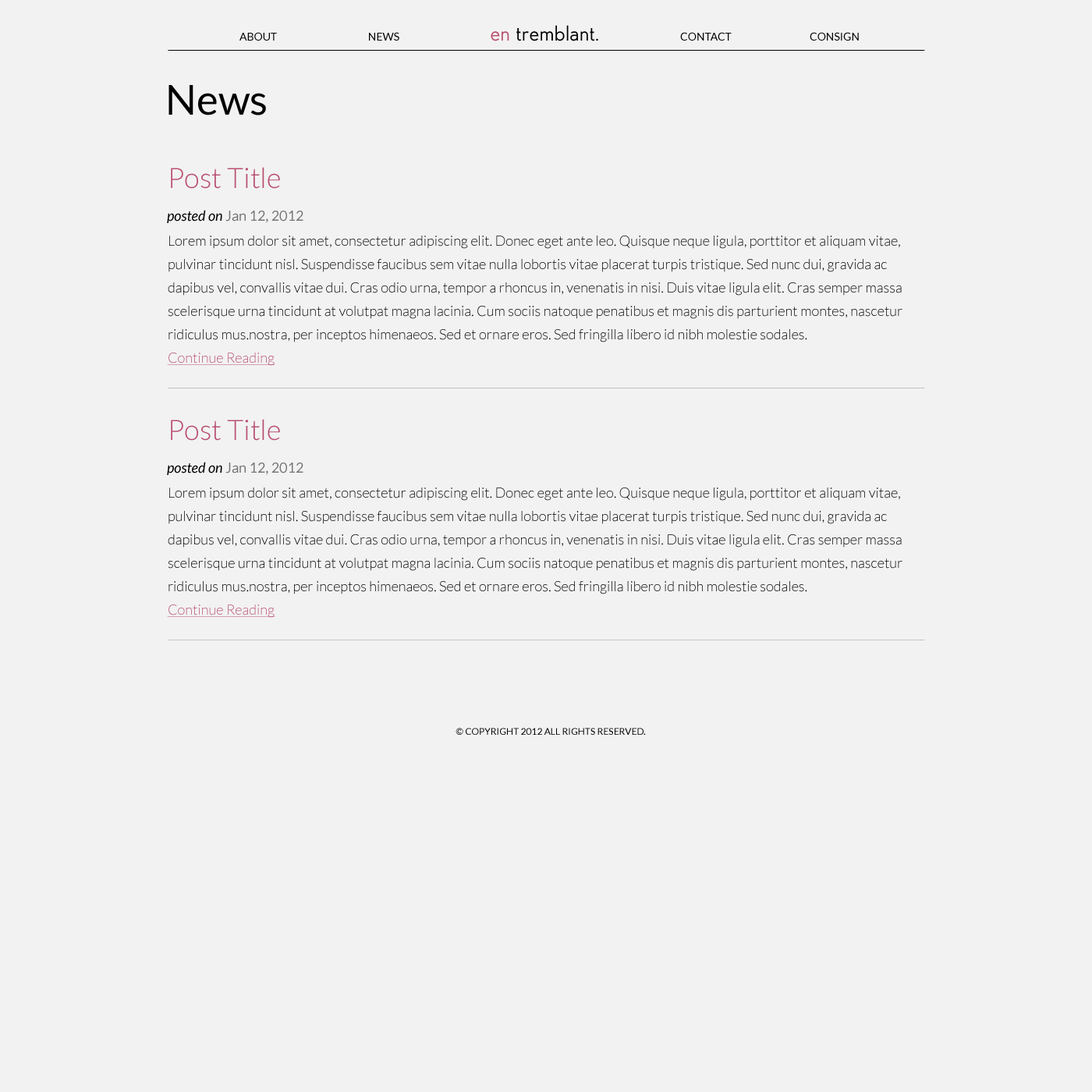
<style>
.page{position:relative;width:1092px;height:1092px;background:#f2f2f2}
.page>*{position:absolute;margin:0}
.t1{font:18.5px "Edelsans";color:#000000}
.t2{font:18.5px "Edelsans";color:#b84f6f}
.t3{font:10.9px "Lato-Regular";color:#000000}
.t4{font:41.3px "Lato-Regular";color:#000000}
.t5{font:28.1px "Lato-Light";color:#b84f6f}
.t6{font:14px "Lato-Regular";color:#757373}
.t7{font:14px "Lato-Italic";color:#000000}
.t8{font:14px/23.4px "Lato-Light";color:#000000}
.t9{font:14px/23.4px "Lato-Light";color:#b84f6f;text-decoration:underline}
.t10{font:9.4px "Lato-Regular";color:#000000}
</style>
<div class="page">
<p class="t1" style="left:491px;top:25px;width:107px;height:16px"><span class="t2">en</span> tremblant.</p>
<p class="t3" style="left:239px;top:32px;width:38px;height:9px">ABOUT</p>
<p class="t3" style="left:369px;top:32px;width:30px;height:9px">NEWS</p>
<p class="t3" style="left:680px;top:32px;width:52px;height:9px">CONTACT</p>
<p class="t3" style="left:810px;top:32px;width:49px;height:9px">CONSIGN</p>
<p class="t4" style="left:168px;top:85px;width:98px;height:30px">News</p>
<p class="t5" style="left:171px;top:167px;width:109px;height:22px">Post Title</p>
<p class="t6" style="left:167px;top:210px;width:136px;height:13px"><span class="t7">posted on </span>Jan 12, 2012</p>
<p class="t8" style="left:167px;top:236px;width:735px;height:130px">Lorem ipsum dolor sit amet, consectetur adipiscing elit. Donec eget ante leo. Quisque neque ligula, porttitor et aliquam vitae, pulvinar tincidunt nisl. Suspendisse faucibus sem vitae nulla lobortis vitae placerat turpis tristique. Sed nunc dui, gravida ac dapibus vel, convallis vitae dui. Cras odio urna, tempor a rhoncus in, venenatis in nisi. Duis vitae ligula elit. Cras semper massa scelerisque urna tincidunt at volutpat magna lacinia. Cum sociis natoque penatibus et magnis dis parturient montes, nascetur ridiculus mus.nostra, per inceptos himenaeos. Sed et ornare eros. Sed fringilla libero id nibh molestie sodales.<br><span class="t9">Continue Reading</span></p>
<p class="t5" style="left:171px;top:419px;width:109px;height:22px">Post Title</p>
<p class="t6" style="left:167px;top:462px;width:136px;height:13px"><span class="t7">posted on </span>Jan 12, 2012</p>
<p class="t8" style="left:167px;top:487px;width:735px;height:131px">Lorem ipsum dolor sit amet, consectetur adipiscing elit. Donec eget ante leo. Quisque neque ligula, porttitor et aliquam vitae, pulvinar tincidunt nisl. Suspendisse faucibus sem vitae nulla lobortis vitae placerat turpis tristique. Sed nunc dui, gravida ac dapibus vel, convallis vitae dui. Cras odio urna, tempor a rhoncus in, venenatis in nisi. Duis vitae ligula elit. Cras semper massa scelerisque urna tincidunt at volutpat magna lacinia. Cum sociis natoque penatibus et magnis dis parturient montes, nascetur ridiculus mus.nostra, per inceptos himenaeos. Sed et ornare eros. Sed fringilla libero id nibh molestie sodales.<br><span class="t9">Continue Reading</span></p>
<p class="t10" style="left:456px;top:728px;width:190px;height:7px">© COPYRIGHT 2012 ALL RIGHTS RESERVED.</p>
</div>
